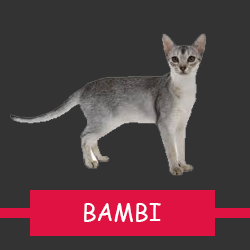
<style>
.page{position:relative;width:250px;height:250px;background:#333333}
.page>*{position:absolute;margin:0}
.t1{font:24px "ComicSansMS";color:#ffffff;scale:0.97 1}
</style>
<div class="page">
<p class="t1" style="left:84px;top:203px;width:77px;height:19px">BAMBI</p>
</div>
